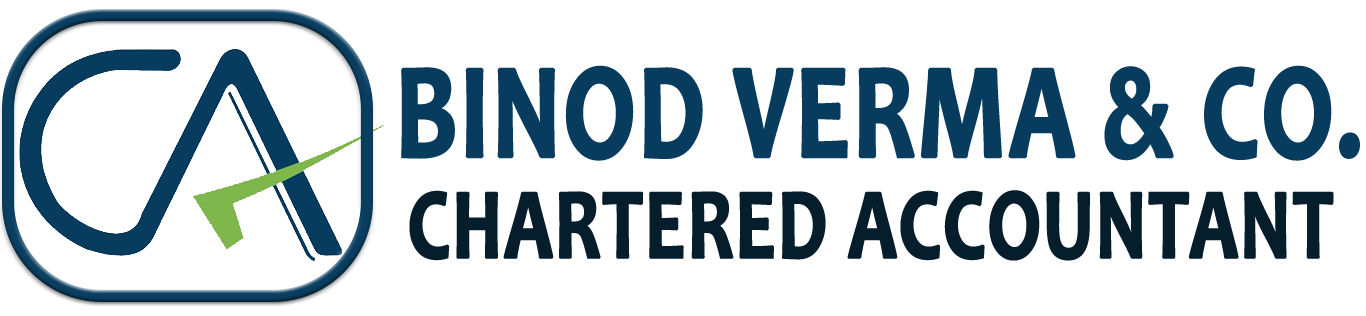
<style>
.page{position:relative;width:1366px;height:316px;background:#ffffff}
.page>*{position:absolute;margin:0}
.t1{font:136.9px "Candara-Bold";letter-spacing:0.005em;color:#073c5e;font-weight:bold;scale:0.75 1}
.t2{font:101.5px "Candara-Bold";letter-spacing:0.005em;color:#061d2b;font-weight:bold;scale:0.75 1}
</style>
<div class="page">
<p class="t1" style="left:401px;top:65px;width:959px;height:96px">BINOD VERMA &amp; CO.</p>
<p class="t2" style="left:409px;top:190px;width:925px;height:71px">CHARTERED ACCOUNTANT</p>
</div>
